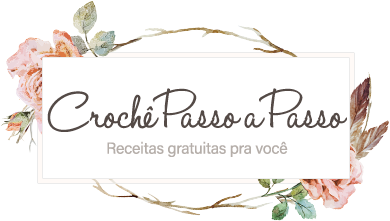
<style>
.page{position:relative;width:390px;height:221px;background:#ffffff}
.page>*{position:absolute;margin:0}
.t1{font:60px "HaloHandletter";letter-spacing:-0.02em;color:#544a46}
.t2{font:16px "AcuminConcept-Regular";letter-spacing:-0.02em;color:#b5aea9}
</style>
<div class="page">
<p class="t1" style="left:47px;top:88px;width:300px;height:44px">Crochê Passo a Passo</p>
<p class="t2" style="left:107px;top:141px;width:181px;height:16px">Receitas gratuitas pra você</p>
</div>
